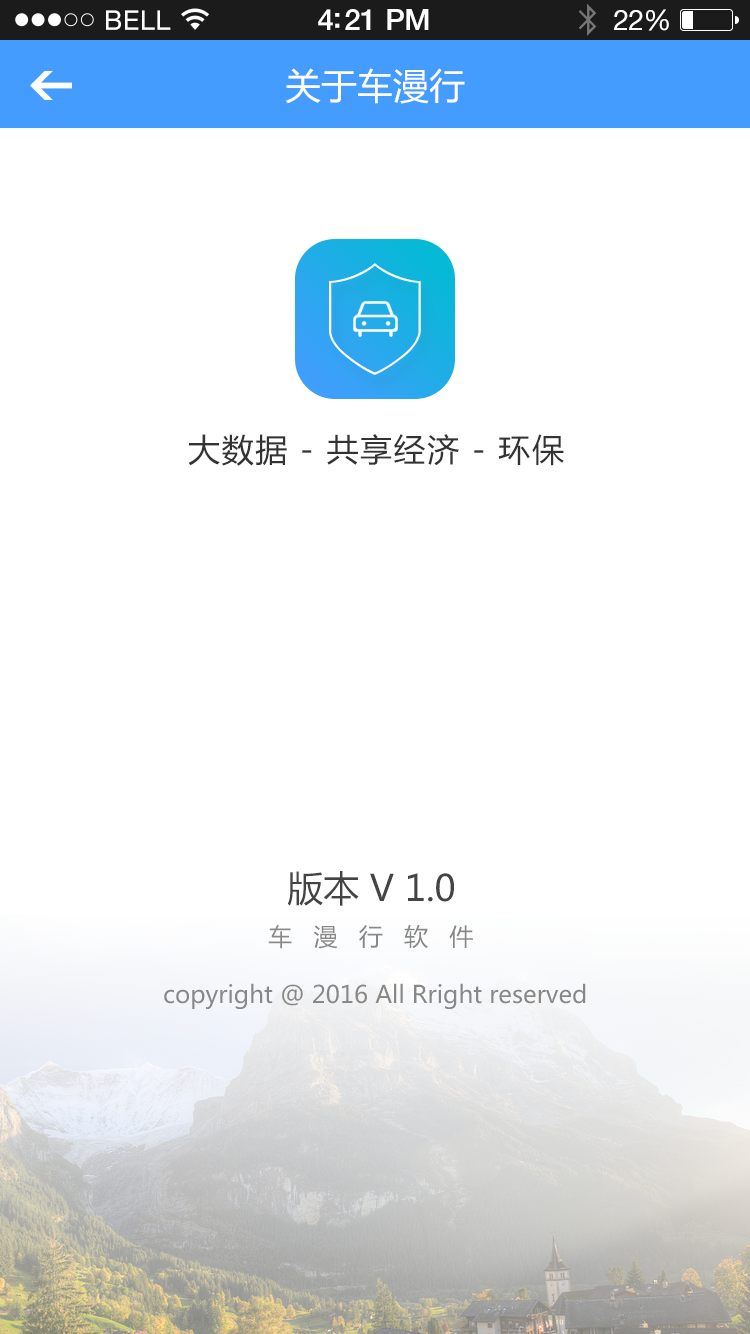
<style>
.page{position:relative;width:750px;height:1334px;background:#ffffff}
.page>*{position:absolute;margin:0}
.t1{font:36px "MicrosoftYaHei";color:#ffffff}
.t2{font:32px "MicrosoftYaHei";letter-spacing:0.05em;color:#333333}
.t3{font:36px "MicrosoftYaHei";color:#444444}
.t4{font:24px "MicrosoftYaHei";color:#888888}
</style>
<div class="page">
<p class="t1" style="left:285px;top:68px;width:180px;height:36px">关于车漫行</p>
<p class="t2" style="left:188px;top:434px;width:376px;height:32px">大数据 - 共享经济 - 环保</p>
<p class="t3" style="left:287px;top:871px;width:167px;height:35px">版本 V 1.0</p>
<p class="t4" style="left:268px;top:925px;width:205px;height:24px">车   漫   行   软   件</p>
<p class="t4" style="left:164px;top:983px;width:422px;height:26px">copyright @ 2016 All Rright reserved</p>
</div>
